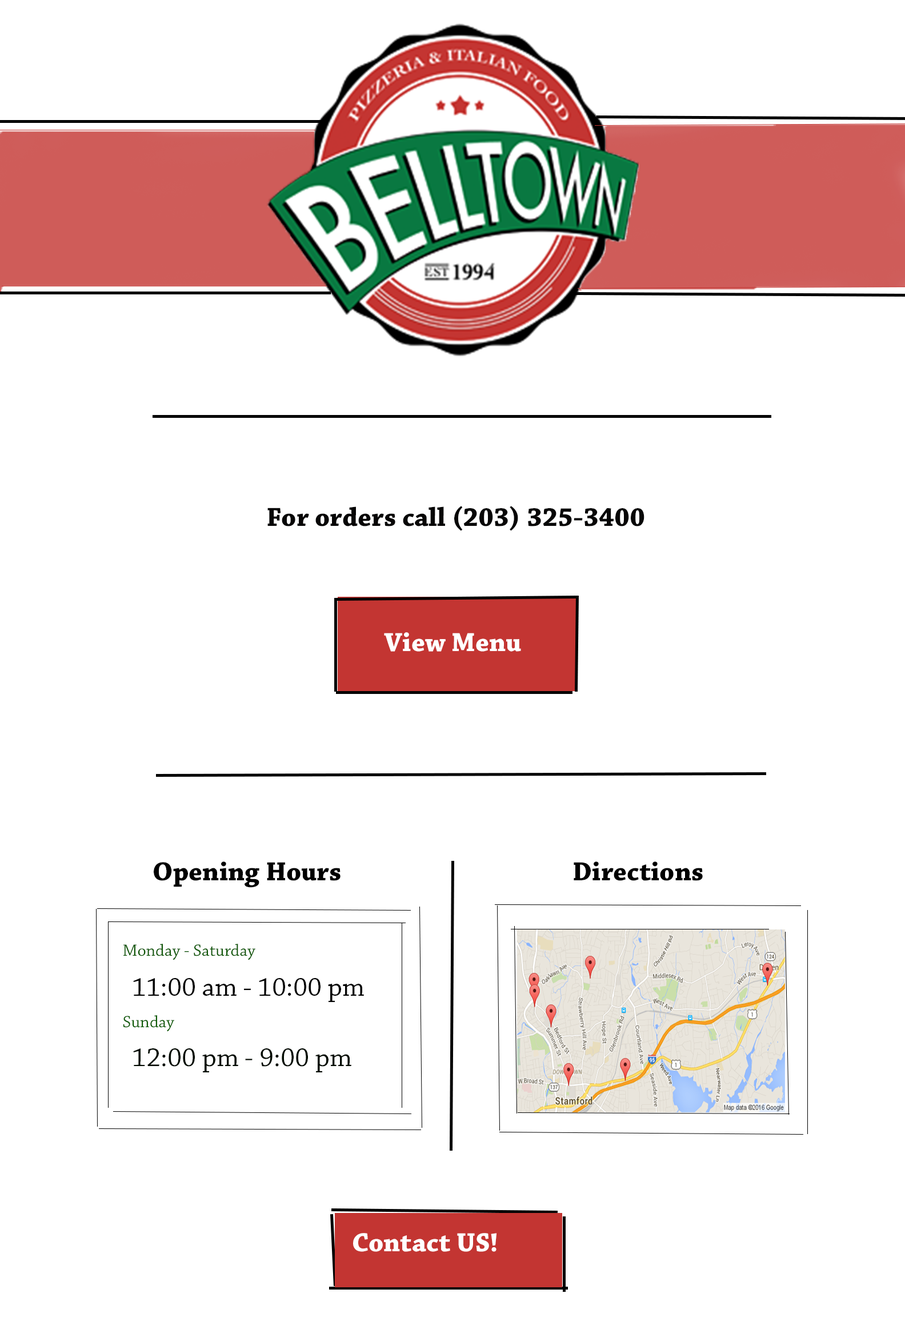
<style>
.page{position:relative;width:905px;height:1317px;background:#ffffff}
.page>*{position:absolute;margin:0}
.t1{font:27.4px "ChaparralPro-Bold";color:#070606}
.t2{font:27.4px "BookAntiqua-Bold";color:#070606}
.t3{font:27.4px "ChaparralPro-Bold";color:#ffffff}
.t4{font:27.4px "ChaparralPro-Bold";color:#000000}
.t5{font:17.1px "ChaparralPro-Regular";color:#0d5605}
.t6{font:27.4px "ChaparralPro-Regular";color:#020202}
.t7{font:17.1px "ChaparralPro-Regular";color:#0d5b05}
.t8{font:27.4px "ChaparralPro-Regular";color:#010a00}
</style>
<div class="page">
<p class="t1" style="left:268px;top:506px;width:377px;height:25px"><span class="t2">                </span> For orders call (203) 325-3400</p>
<p class="t3" style="left:384px;top:632px;width:137px;height:20px">View Menu</p>
<p class="t4" style="left:154px;top:861px;width:187px;height:27px">Opening Hours</p>
<p class="t4" style="left:574px;top:861px;width:129px;height:20px">Directions</p>
<p class="t5" style="left:123px;top:944px;width:133px;height:16px">Monday - Saturday</p>
<p class="t6" style="left:133px;top:978px;width:231px;height:24px">11:00 am - 10:00 pm</p>
<p class="t7" style="left:123px;top:1015px;width:51px;height:17px">Sunday</p>
<p class="t8" style="left:133px;top:1048px;width:219px;height:24px">12:00 pm - 9:00 pm</p>
<p class="t3" style="left:353px;top:1233px;width:144px;height:19px">Contact US!</p>
</div>
